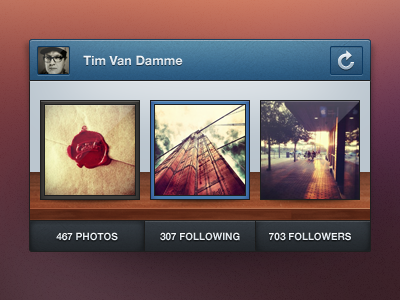
<style>
.page{position:relative;width:400px;height:300px}
.page>*{position:absolute;margin:0}
.t1{font:12.8px "HelveticaNeue-Bold";color:#dbe4eb}
.t2{font:10px "HelveticaNeue-Bold";color:#edf1f5;text-transform:uppercase}
.t3{font:10px "HelveticaNeue-Bold";color:#e3eaf0;text-transform:uppercase}
.t4{font:10px "HelveticaNeue-Bold";color:#e8eef3;text-transform:uppercase}
</style>
<div class="page">
<p class="t1" style="left:83px;top:55px;width:100px;height:11px">Tim Van Damme</p>
<p class="t2" style="left:56px;top:232px;width:62px;height:9px">467 photos</p>
<p class="t3" style="left:160px;top:232px;width:80px;height:9px">307 following</p>
<p class="t4" style="left:269px;top:232px;width:82px;height:9px">703 followers</p>
</div>
